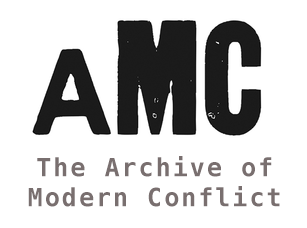
<style>
.page{position:relative;width:307px;height:228px;background:#ffffff}
.page>*{position:absolute;margin:0}
.t1{font:25px "Menlo-Bold";letter-spacing:0.08em;color:#796f6f}
</style>
<div class="page">
<p class="t1" style="left:28px;top:156px;width:252px;height:51px;text-align:center">The Archive of Modern Conflict</p>
</div>
